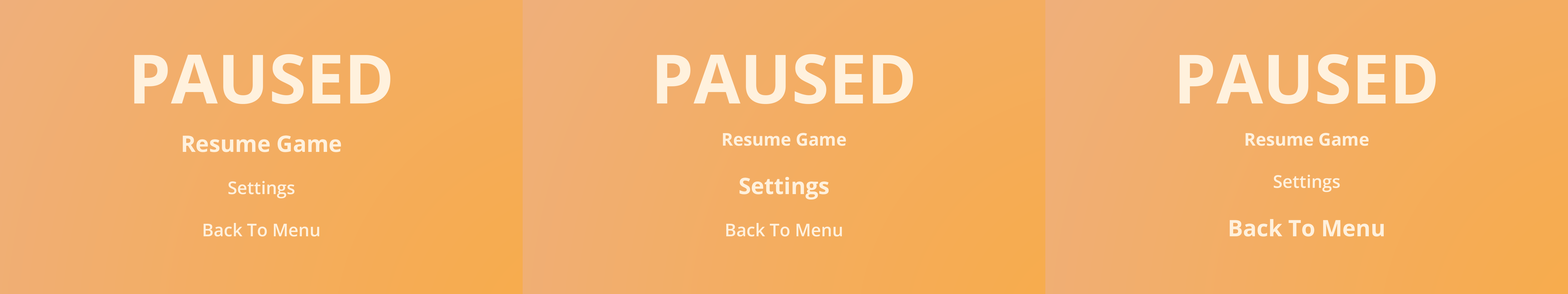
<style>
.page{position:relative;width:1568px;height:294px}
.page>*{position:absolute;margin:0}
.t1{font:17.6px "OpenSans-Semibold";color:#fff1dd}
.t2{font:17.6px "OpenSans-Bold";color:#8f8b8b}
.t3{font:68.1px "OpenSans-Bold";color:#fff1dd}
.t4{font:22.7px "OpenSans-Bold";color:#fff1dd}
.t5{font:17.6px "OpenSans-Bold";color:#fff1dd}
</style>
<div class="page">
<p class="t1" style="left:134px;top:54px;width:256px;height:183px;text-align:center"><span class="t2"><br><br><br></span><span class="t3">PAUSED<br><br></span><span class="t4">Resume Game<br></span><br>Settings<br><br>Back To Menu</p>
<p class="t1" style="left:657px;top:54px;width:256px;height:183px;text-align:center"><span class="t2"><br><br><br></span><span class="t3">PAUSED<br></span><span class="t5"><br>Resume Game<br><br></span><span class="t4">Settings<br></span><br>Back To Menu</p>
<p class="t4" style="left:1180px;top:54px;width:256px;height:183px;text-align:center"><span class="t2"><br><br><br></span><span class="t3">PAUSED<br></span><span class="t5"><br>Resume Game<br></span><span class="t1"><br>Settings<br><br></span>Back To Menu</p>
</div>
